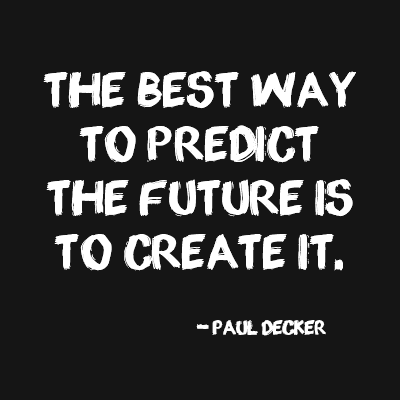
<style>
.page{position:relative;width:400px;height:400px;background:#151515}
.page>*{position:absolute;margin:0}
.t1{font:45px "appopaint-Regular";color:#ffffff}
.t2{font:18px "appopaint-Regular";color:#ffffff}
</style>
<div class="page">
<p class="t1" style="left:43px;top:71px;width:313px;height:200px;text-align:center">The best way to predict the future is to create it.</p>
<p class="t2" style="left:196px;top:320px;width:130px;height:16px">- Paul Decker</p>
</div>
